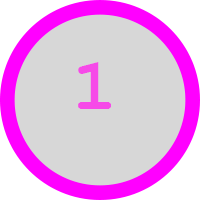
<style>
.page{position:relative;width:200px;height:200px;background:#d7d7d7}
.page>*{position:absolute;margin:0}
.t1{font:75px "CourierNewPS-BoldMT";color:#f64ae8}
</style>
<div class="page">
<p class="t1" style="left:78px;top:62px;width:33px;height:47px">1</p>
</div>
